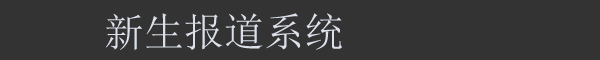
<style>
.page{position:relative;width:600px;height:60px;background:#333333}
.page>*{position:absolute;margin:0}
.t1{font:40px "NSimSun";color:#dbe0ea}
</style>
<div class="page">
<p class="t1" style="left:105px;top:13px;width:237px;height:37px">新生报道系统</p>
</div>
